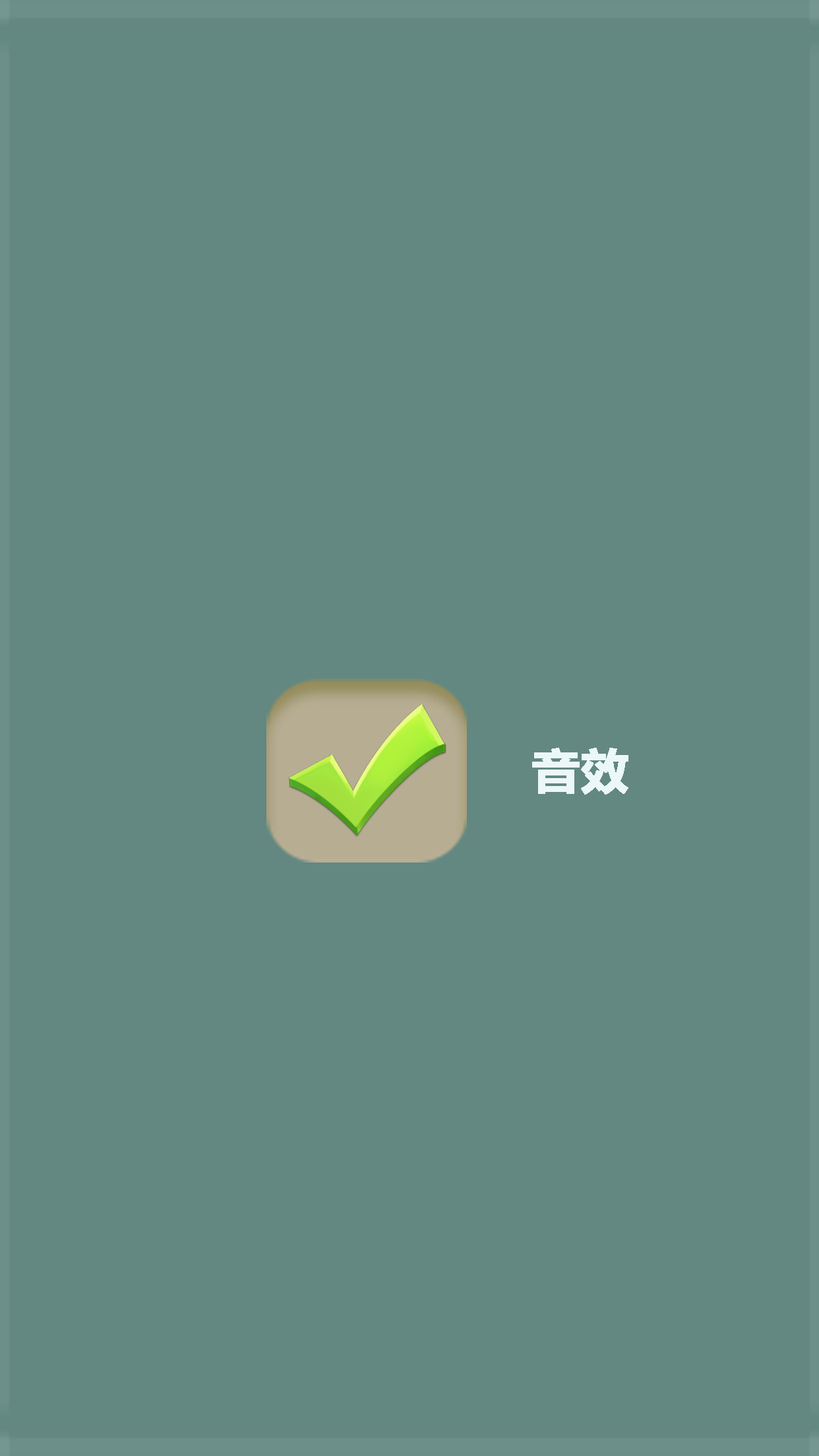
<style>
.page{position:relative;width:819px;height:1456px;background:#628881}
.page>*{position:absolute;margin:0}
.t1{font:47.5px "MicrosoftYaHei-Bold";letter-spacing:0.005em;color:#ecf7f9;font-weight:bold}
</style>
<div class="page">
<p class="t1" style="left:532px;top:748px;width:96px;height:47px">音效</p>
</div>
